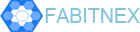
<style>
.page{position:relative;width:140px;height:32px;background:#ffffff}
.page>*{position:absolute;margin:0}
.t1{font:19.5px "ArialMT";color:#83c4da}
</style>
<div class="page">
<p class="t1" style="left:45px;top:8px;width:95px;height:15px">FABITNEX</p>
</div>
